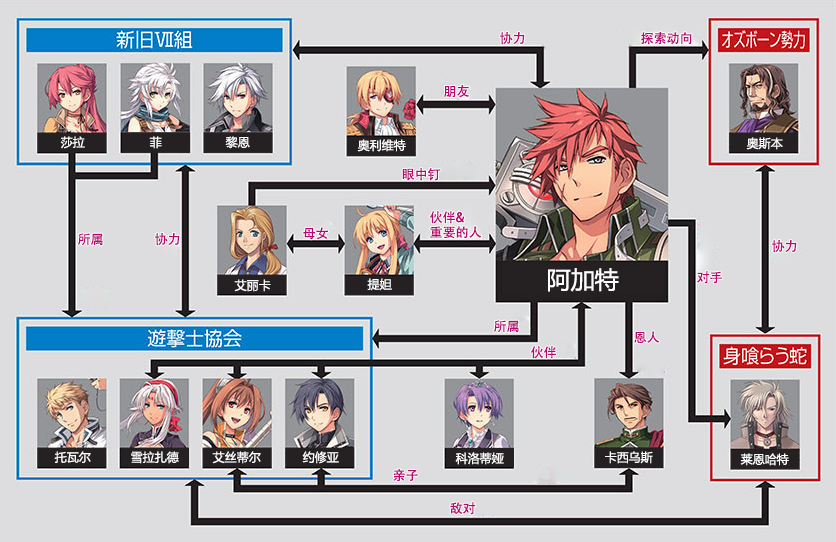
<style>
.page{position:relative;width:836px;height:542px;background:#dddddf}
.page>*{position:absolute;margin:0}
.t1{font:13px "AdobeHeitiStd-Regular";color:#b70773}
.t2{font:12px "MicrosoftYaHei";color:#ffffff}
.t3{font:13px/15px "AdobeHeitiStd-Regular";color:#b70773}
.t4{font:24px "MicrosoftYaHei";color:#ffffff}
</style>
<div class="page">
<p class="t1" style="left:500px;top:32px;width:25px;height:13px">协力</p>
<p class="t1" style="left:641px;top:32px;width:51px;height:13px">探索动向</p>
<p class="t1" style="left:444px;top:85px;width:25px;height:13px">朋友</p>
<p class="t2" style="left:60px;top:136px;width:25px;height:13px">莎拉</p>
<p class="t2" style="left:149px;top:136px;width:13px;height:13px">菲</p>
<p class="t2" style="left:225px;top:136px;width:25px;height:13px">黎恩</p>
<p class="t2" style="left:746px;top:137px;width:37px;height:13px">奥斯本</p>
<p class="t2" style="left:357px;top:139px;width:49px;height:13px">奥利维特</p>
<p class="t1" style="left:402px;top:168px;width:39px;height:13px">眼中钉</p>
<p class="t3" style="left:430px;top:211px;width:52px;height:28px">伙伴&amp;<br>重要的人</p>
<p class="t1" style="left:78px;top:233px;width:25px;height:13px">所属</p>
<p class="t1" style="left:155px;top:233px;width:25px;height:13px">协力</p>
<p class="t1" style="left:303px;top:227px;width:25px;height:13px">母女</p>
<p class="t1" style="left:772px;top:240px;width:25px;height:13px">协力</p>
<p class="t4" style="left:548px;top:268px;width:71px;height:24px">阿加特</p>
<p class="t2" style="left:234px;top:279px;width:37px;height:13px">艾丽卡</p>
<p class="t2" style="left:367px;top:278px;width:25px;height:13px">提妲</p>
<p class="t1" style="left:697px;top:271px;width:25px;height:13px">对手</p>
<p class="t1" style="left:494px;top:320px;width:25px;height:13px">所属</p>
<p class="t1" style="left:634px;top:331px;width:26px;height:12px">恩人</p>
<p class="t1" style="left:531px;top:346px;width:25px;height:13px">伙伴</p>
<p class="t2" style="left:54px;top:451px;width:37px;height:12px">托瓦尔</p>
<p class="t2" style="left:131px;top:451px;width:48px;height:13px">雪拉扎德</p>
<p class="t2" style="left:212px;top:451px;width:49px;height:13px">艾丝蒂尔</p>
<p class="t2" style="left:302px;top:451px;width:37px;height:13px">约修亚</p>
<p class="t2" style="left:455px;top:452px;width:49px;height:13px">科洛蒂娅</p>
<p class="t2" style="left:605px;top:451px;width:48px;height:13px">卡西乌斯</p>
<p class="t2" style="left:740px;top:453px;width:49px;height:13px">莱恩哈特</p>
<p class="t1" style="left:393px;top:469px;width:25px;height:13px">亲子</p>
<p class="t1" style="left:450px;top:502px;width:26px;height:13px">敌对</p>
</div>
